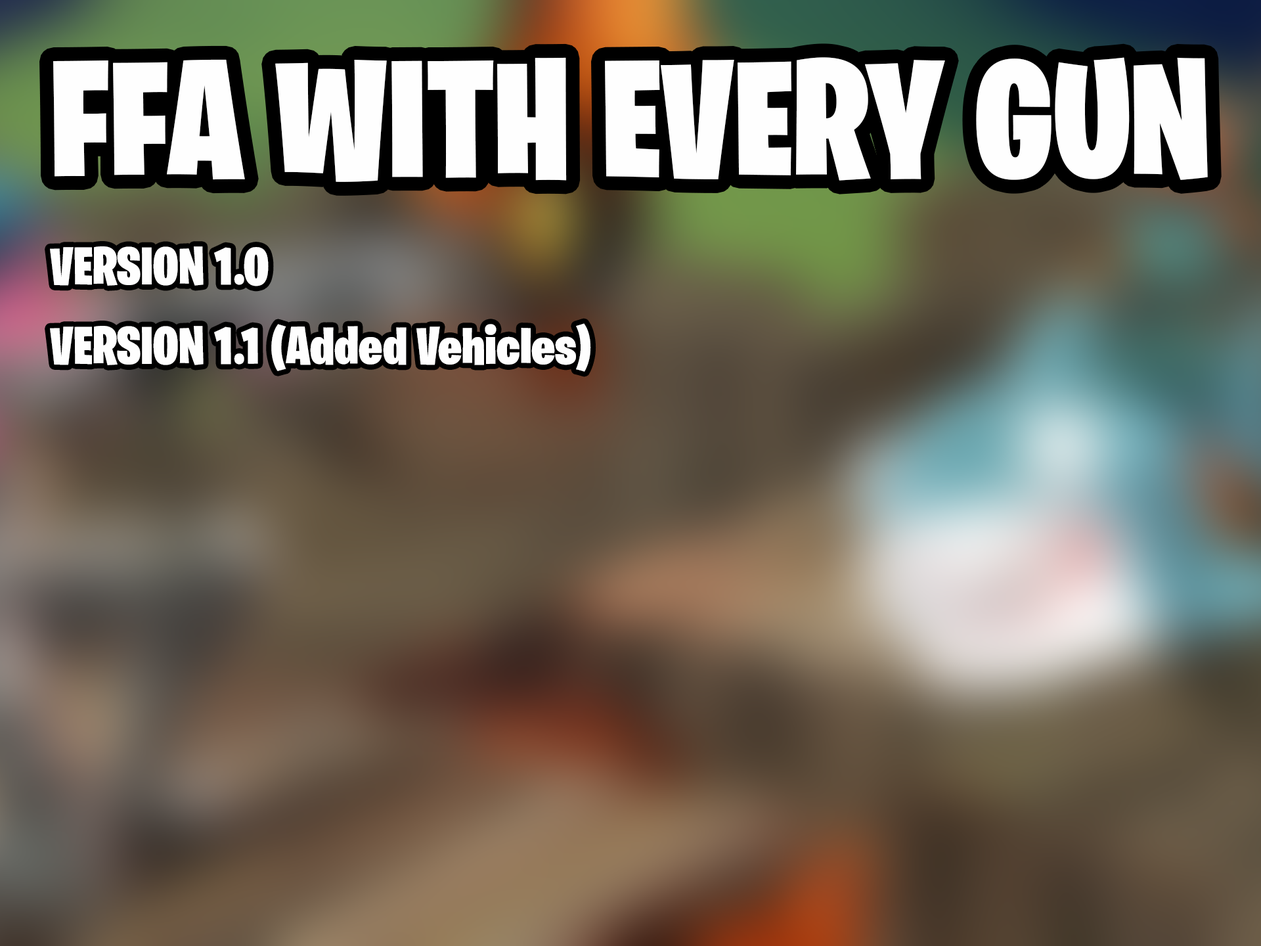
<style>
.page{position:relative;width:1261px;height:946px}
.page>*{position:absolute;margin:0}
.t1{font:166.5px "BurbankBigCondensed-Black";color:#fefefe}
.t2{font:53.3px "BurbankBigCondensed-Black";color:#fefefe}
</style>
<div class="page">
<p class="t1" style="left:53px;top:57px;width:1155px;height:125px">FFA WITH EVERY GUN</p>
<p class="t2" style="left:50px;top:246px;width:219px;height:40px">VERSION 1.0</p>
<p class="t2" style="left:50px;top:323px;width:541px;height:49px">VERSION 1.1 (Added Vehicles)</p>
</div>
